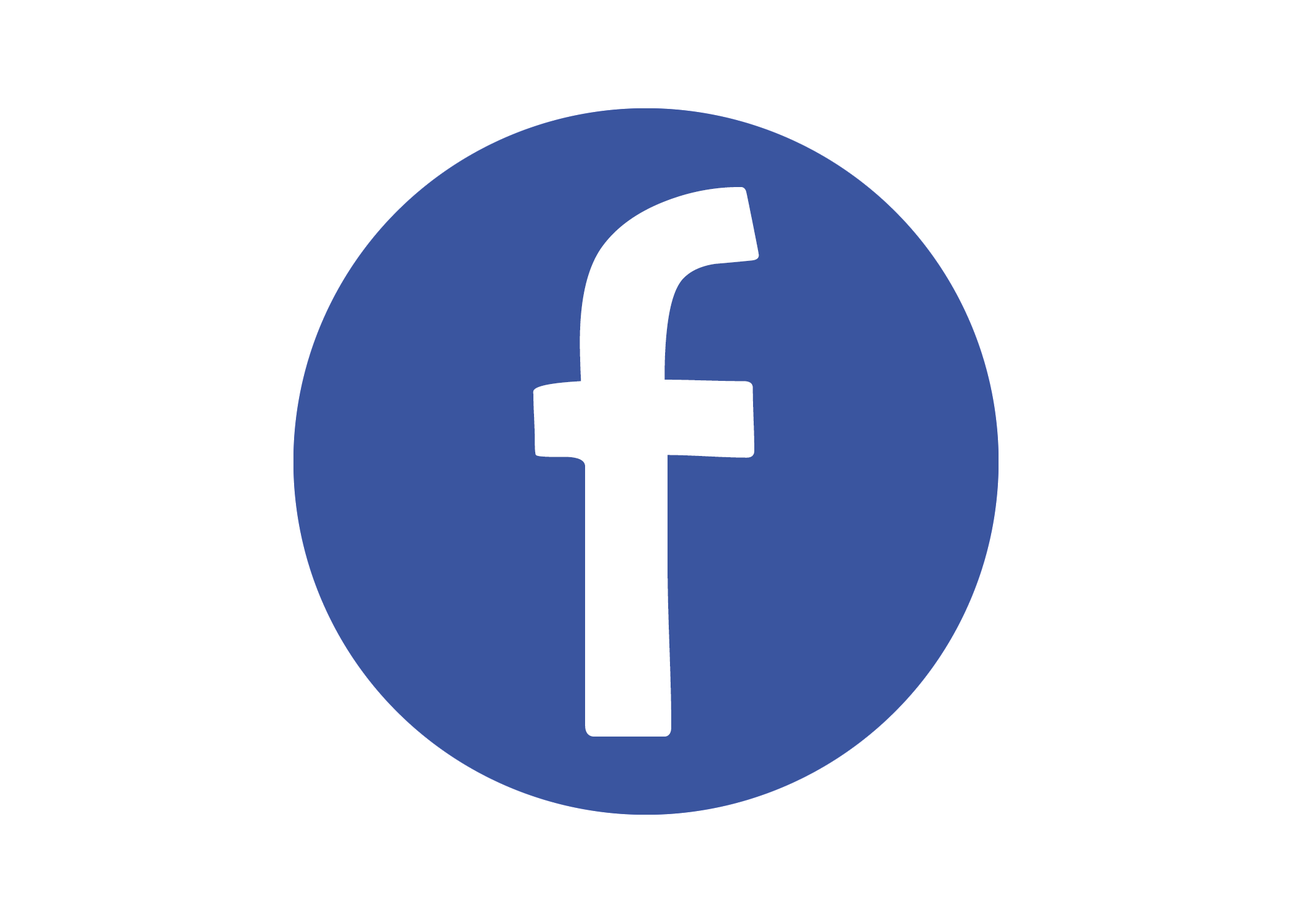
<style>
.page{position:relative;width:1292px;height:923px;background:#ffffff}
.page>*{position:absolute;margin:0}
.t1{font:769.1px "BerlinSansFB-Reg";color:#ffffff}
</style>
<div class="page">
<p class="t1" style="left:533px;top:187px;width:226px;height:549px">f</p>
</div>
